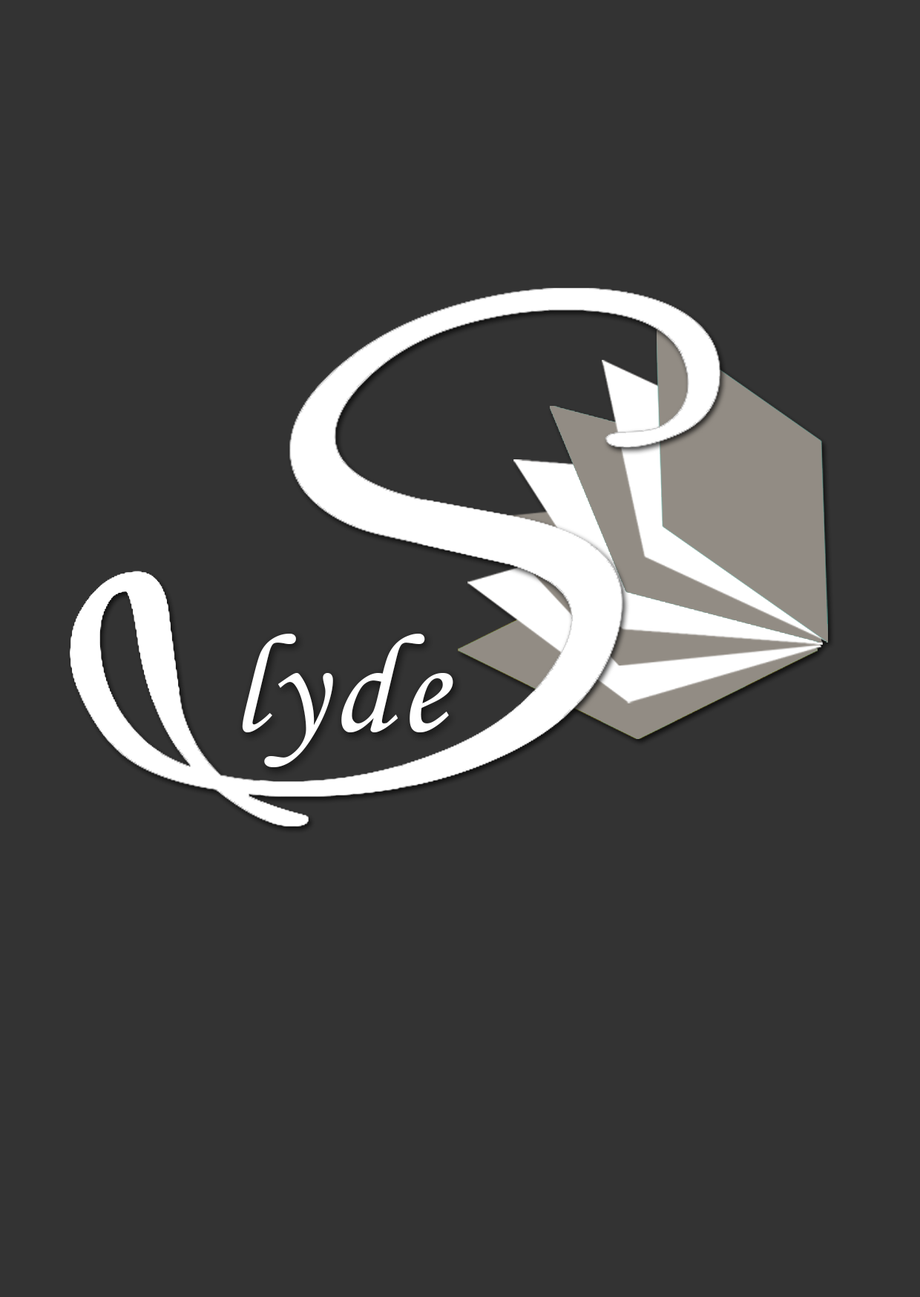
<style>
.page{position:relative;width:920px;height:1297px;background:#333333}
.page>*{position:absolute;margin:0}
.t1{font:141px "MonotypeCorsiva";letter-spacing:0.04em;color:#ffffff}
</style>
<div class="page">
<p class="t1" style="left:242px;top:633px;width:211px;height:134px">lyde</p>
</div>
